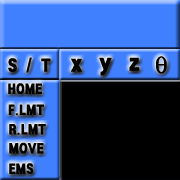
<style>
.page{position:relative;width:180px;height:180px;background:#000000}
.page>*{position:absolute;margin:0}
.t1{font:18px "GothicXB-HM";color:#000000}
.t2{font:24px "GothicXB-HM";color:#000000}
.t3{font:14px "GothicXB-HM";color:#000000}
</style>
<div class="page">
<p class="t1" style="left:8px;top:57px;width:43px;height:16px">S / T</p>
<p class="t2" style="left:70px;top:58px;width:13px;height:14px">x</p>
<p class="t2" style="left:99px;top:57px;width:13px;height:19px">y</p>
<p class="t2" style="left:129px;top:57px;width:11px;height:14px">z</p>
<p class="t3" style="left:8px;top:83px;width:34px;height:11px">HOME</p>
<p class="t3" style="left:8px;top:104px;width:36px;height:12px">F.LMT</p>
<p class="t3" style="left:9px;top:124px;width:37px;height:11px">R.LMT</p>
<p class="t3" style="left:9px;top:142px;width:35px;height:12px">MOVE</p>
<p class="t3" style="left:9px;top:163px;width:25px;height:11px">EMS</p>
</div>
